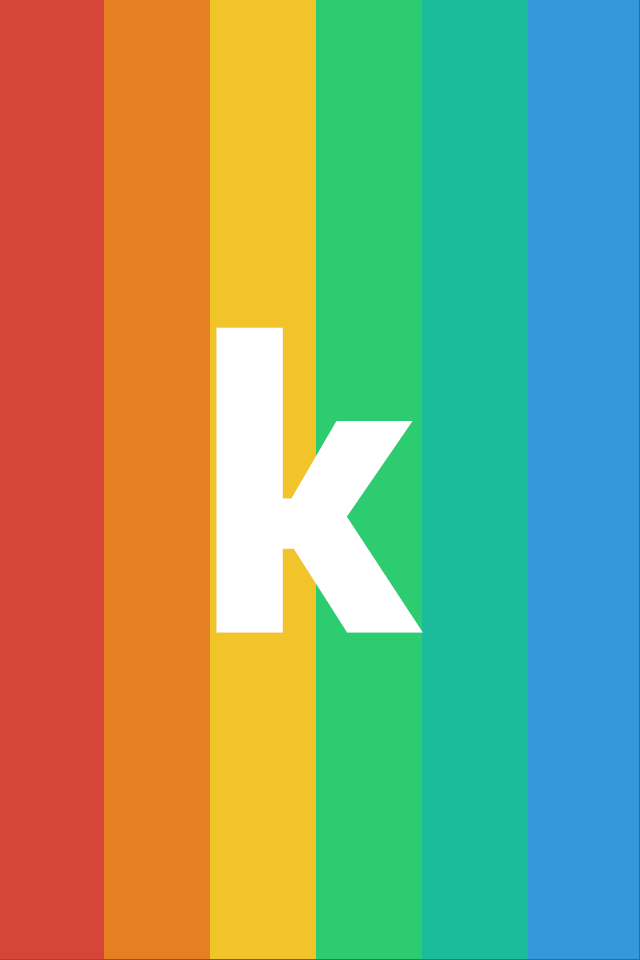
<style>
.page{position:relative;width:640px;height:960px}
.page>*{position:absolute;margin:0}
.t1{font:400.1px "Roboto-Black";color:#ffffff}
</style>
<div class="page">
<p class="t1" style="left:216px;top:327px;width:207px;height:306px">k</p>
</div>
